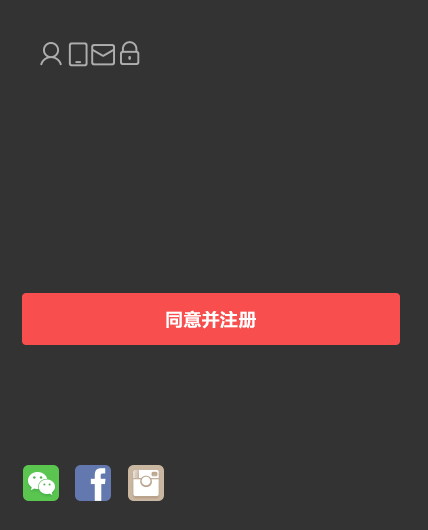
<style>
.page{position:relative;width:428px;height:530px;background:#333333}
.page>*{position:absolute;margin:0}
.t1{font:18px "FZLTZHJW--GB1-0";color:#ffffff;font-weight:bold}
</style>
<div class="page">
<p class="t1" style="left:166px;top:310px;width:90px;height:19px">同意并注册</p>
</div>
